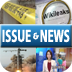
<style>
.page{position:relative;width:72px;height:72px}
.page>*{position:absolute;margin:0}
.t1{font:15.6px "RixJGoB";color:#ffffff;font-weight:bold;scale:0.67 1}
.t2{font:8.7px "SDDogSuRiM";color:#ffffff;font-weight:bold}
</style>
<div class="page">
<p class="t1" style="left:2px;top:29px;width:68px;height:14px">ISSUE     NEWS</p>
<p class="t2" style="left:33px;top:32px;width:6px;height:8px">&amp;</p>
</div>
